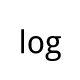
<style>
.page{position:relative;width:80px;height:80px;background:#ffffff}
.page>*{position:absolute;margin:0}
.t1{font:31.8px "DroidSans";color:#000000}
</style>
<div class="page">
<p class="t1" style="left:21px;top:29px;width:40px;height:32px">log</p>
</div>
